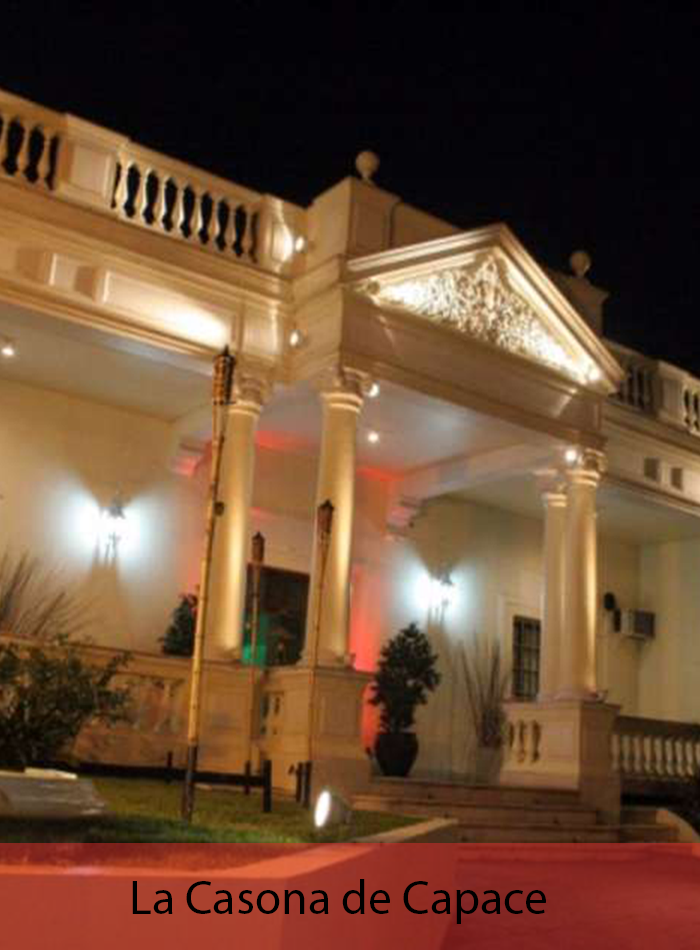
<style>
.page{position:relative;width:700px;height:950px}
.page>*{position:absolute;margin:0}
.t1{font:48px "MyriadPro-Regular";color:#000000}
</style>
<div class="page">
<p class="t1" style="left:132px;top:879px;width:414px;height:45px">La Casona de Capace</p>
</div>
